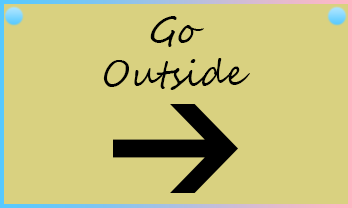
<style>
.page{position:relative;width:352px;height:208px;background:#d9d180}
.page>*{position:absolute;margin:0}
.t1{font:36px "SegoeScript";color:#000000;scale:1.3 1}
</style>
<div class="page">
<p class="t1" style="left:103px;top:16px;width:147px;height:74px;text-align:center">Go<br>Outside</p>
</div>
